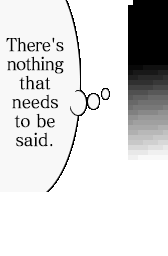
<style>
.page{position:relative;width:168px;height:256px;background:#ffffff}
.page>*{position:absolute;margin:0}
.t1{font:17.6px/19px "MatissePro-M";letter-spacing:-0.01em;color:#000000;font-weight:bold;scale:0.91 1}
.t2{font:17.6px/19px "MatissePro-M";letter-spacing:-0.05em;color:#000000;font-weight:bold;scale:0.91 1}
</style>
<div class="page">
<p class="t1" style="left:6px;top:37px;width:58px;height:110px;text-align:center"><span class="t2">There's<br>nothing<br></span>that<br>needs<br>to be<br>said.</p>
</div>
